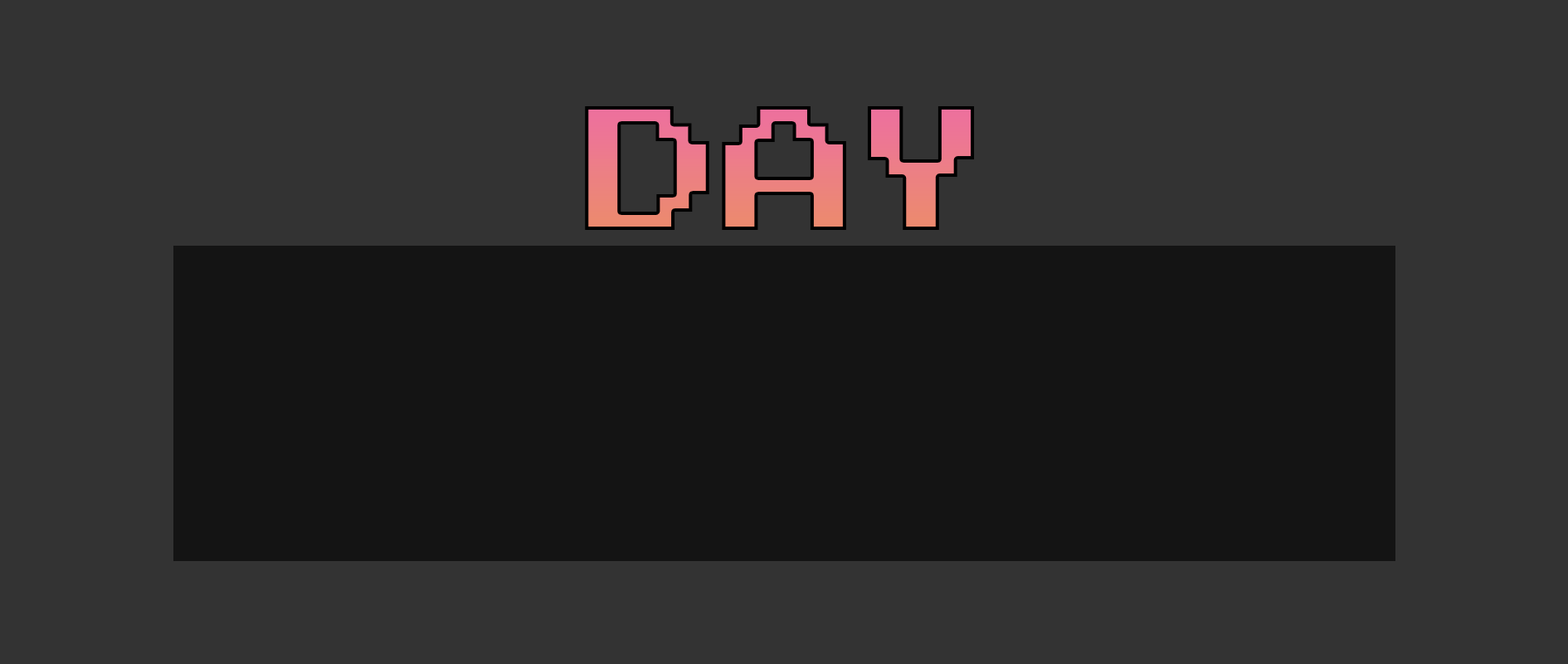
<style>
.page{position:relative;width:1568px;height:664px;background:#333333}
.page>*{position:absolute;margin:0}
.t1{font:248.9px "ArcadeClassic"}
</style>
<div class="page">
<p class="t1" style="left:585px;top:106px;width:390px;height:124px">DAY</p>
</div>
